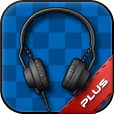
<style>
.page{position:relative;width:114px;height:114px}
.page>*{position:absolute;margin:0}
.t1{font:8.6px "EthnocentricRg-Regular";color:#ffffff;scale:1.14 1}
</style>
<div class="page">
<p class="t1" style="left:80px;top:78px;width:28px;height:30px;rotate:-46deg">PLUS</p>
</div>
